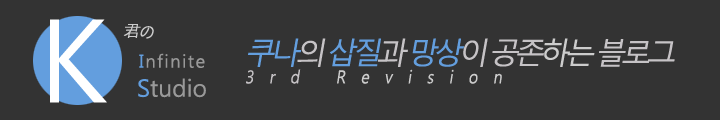
<style>
.page{position:relative;width:720px;height:120px;background:#333333}
.page>*{position:absolute;margin:0}
.t1{font:115px "MalgunGothicRegular";color:#ffffff}
.t2{font:18px "Gulim";letter-spacing:-0.16em;color:#cccccc;font-style:italic}
.t3{font:18px "MalgunGothicRegular";letter-spacing:-0.16em;color:#cccccc;font-style:italic}
.t4{font:18px "MalgunGothicRegular";letter-spacing:1em;color:#cccccc;font-style:italic;scale:0.86 1}
.t5{font:30px "MalgunGothicRegular";letter-spacing:-0.16em;color:#639ede;font-style:italic}
.t6{font:30px "MalgunGothicRegular";letter-spacing:-0.16em;color:#c6c3c6;font-style:italic}
.t7{font:30px "MalgunGothicRegular";letter-spacing:-0.16em;color:#cccccc;font-style:italic}
.t8{font:18px "MalgunGothicRegular";letter-spacing:1em;color:#c6c3c6;font-style:italic;scale:0.86 1}
.t9{font:18px "MalgunGothicRegular";letter-spacing:0.08em;color:#999999}
.t10{font:18px "MalgunGothicRegular";letter-spacing:0.08em;color:#639ede}
.t11{font:24px "MalgunGothicRegular";color:#999999}
.t12{font:24px "MalgunGothicRegular";color:#639ede}
</style>
<div class="page">
<p class="t1" style="left:50px;top:19px;width:57px;height:84px">K</p>
<p class="t2" style="left:123px;top:24px;width:31px;height:15px">君<span class="t3">の</span></p>
<p class="t4" style="left:246px;top:38px;width:429px;height:46px"><span class="t5">쿠나</span><span class="t6">의 </span><span class="t5">삽질</span><span class="t6">과 </span><span class="t5">망상</span><span class="t6">이 공존</span><span class="t7">하는 </span><span class="t6">블로그<br></span><span class="t8">3rd</span> Revision</p>
<p class="t9" style="left:139px;top:53px;width:66px;height:15px"><span class="t10">I</span>nfinite</p>
<p class="t11" style="left:138px;top:78px;width:68px;height:20px"><span class="t12">S</span>tudio</p>
</div>
